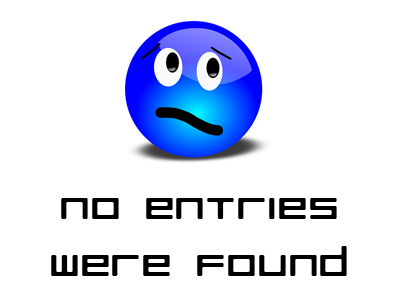
<style>
.page{position:relative;width:400px;height:300px;background:#ffffff}
.page>*{position:absolute;margin:0}
.t1{font:38.4px "RazerRegular";color:#000000;scale:1.25 1}
</style>
<div class="page">
<p class="t1" style="left:51px;top:198px;width:296px;height:78px;text-align:center">No Entries<br>were found</p>
</div>
